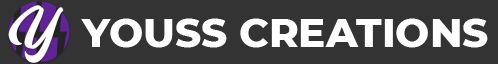
<style>
.page{position:relative;width:498px;height:64px;background:#333333}
.page>*{position:absolute;margin:0}
.t1{font:40.5px "Montserrat-ExtraBold";color:#ffffff}
</style>
<div class="page">
<p class="t1" style="left:81px;top:18px;width:407px;height:30px">YOUSS CREATIONS</p>
</div>
